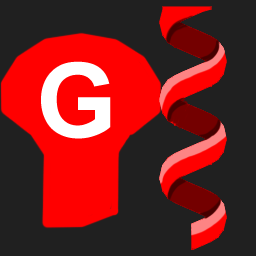
<style>
.page{position:relative;width:256px;height:256px;background:#202020}
.page>*{position:absolute;margin:0}
.t1{font:103.2px "Arial-BoldMT";letter-spacing:0.05em;color:#ffffff}
</style>
<div class="page">
<p class="t1" style="left:41px;top:61px;width:70px;height:78px">G</p>
</div>
